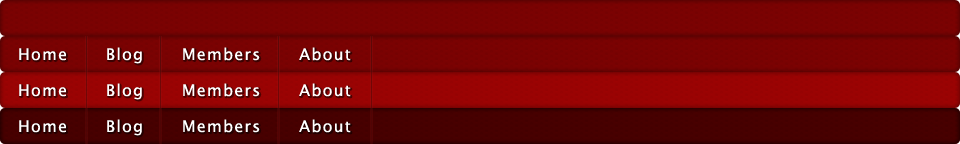
<style>
.page{position:relative;width:960px;height:144px}
.page>*{position:absolute;margin:0}
.t1{font:16px "LucidaGrande";letter-spacing:0.075em;color:#ffffff}
</style>
<div class="page">
<p class="t1" style="left:19px;top:47px;width:332px;height:17px">Home      Blog      Members      About</p>
<p class="t1" style="left:19px;top:83px;width:332px;height:17px">Home      Blog      Members      About</p>
<p class="t1" style="left:19px;top:119px;width:332px;height:17px">Home      Blog      Members      About</p>
</div>
